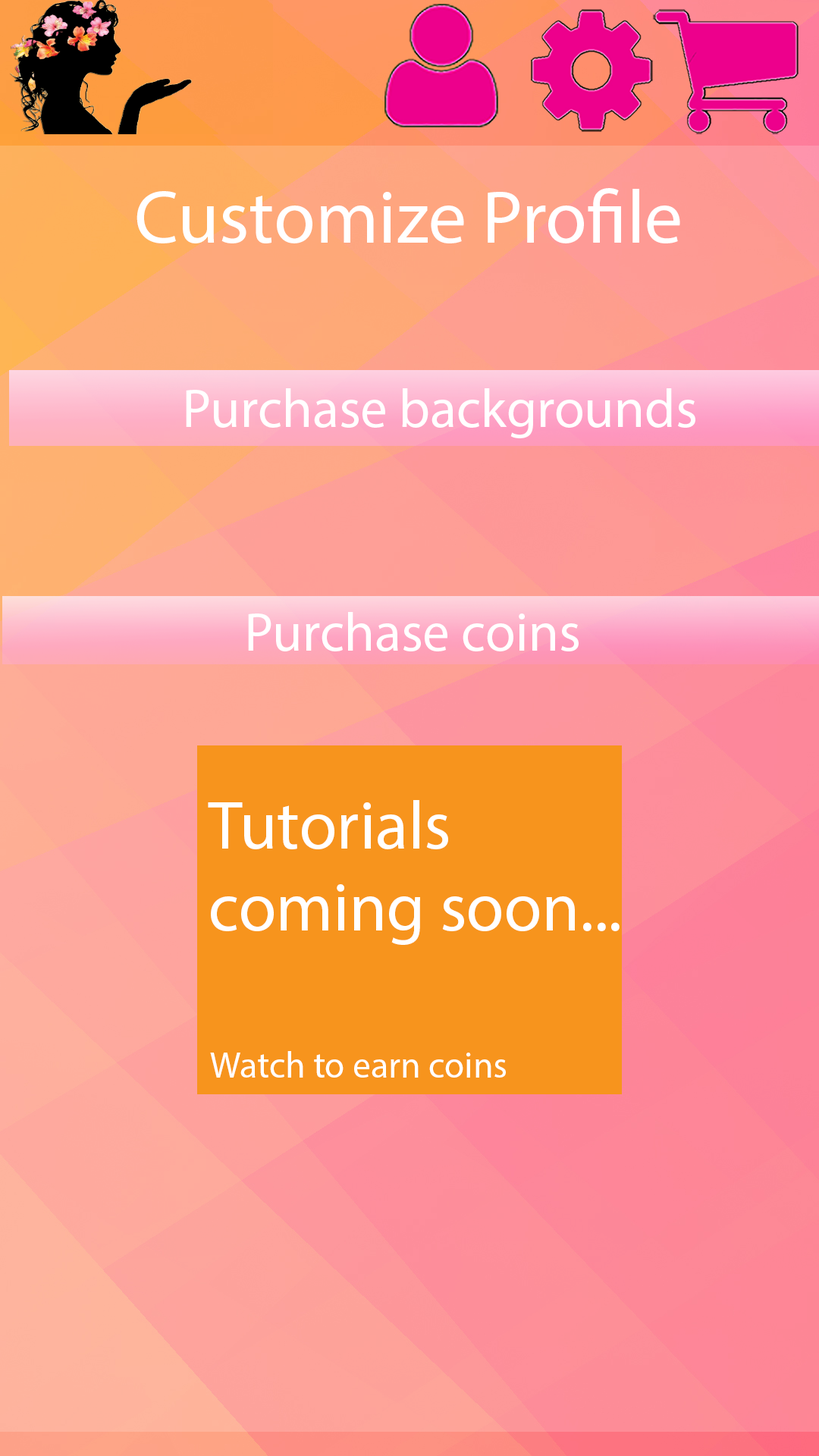
<style>
.page{position:relative;width:819px;height:1456px}
.page>*{position:absolute;margin:0}
.t1{font:75.8px "MyriadPro-Regular";color:#ffffff}
.t2{font:54.6px "MyriadPro-Regular";color:#ffffff}
.t3{font:68.2px "MyriadPro-Regular";color:#ffffff}
.t4{font:36.4px "MyriadPro-Regular";color:#ffffff}
</style>
<div class="page">
<p class="t1" style="left:136px;top:188px;width:544px;height:55px">Customize Profile</p>
<p class="t2" style="left:186px;top:388px;width:509px;height:50px">Purchase backgrounds</p>
<p class="t2" style="left:248px;top:612px;width:331px;height:39px">Purchase coins</p>
<p class="t3" style="left:208px;top:800px;width:412px;height:145px">Tutorials coming soon...</p>
<p class="t4" style="left:210px;top:1051px;width:296px;height:27px">Watch to earn coins</p>
</div>
